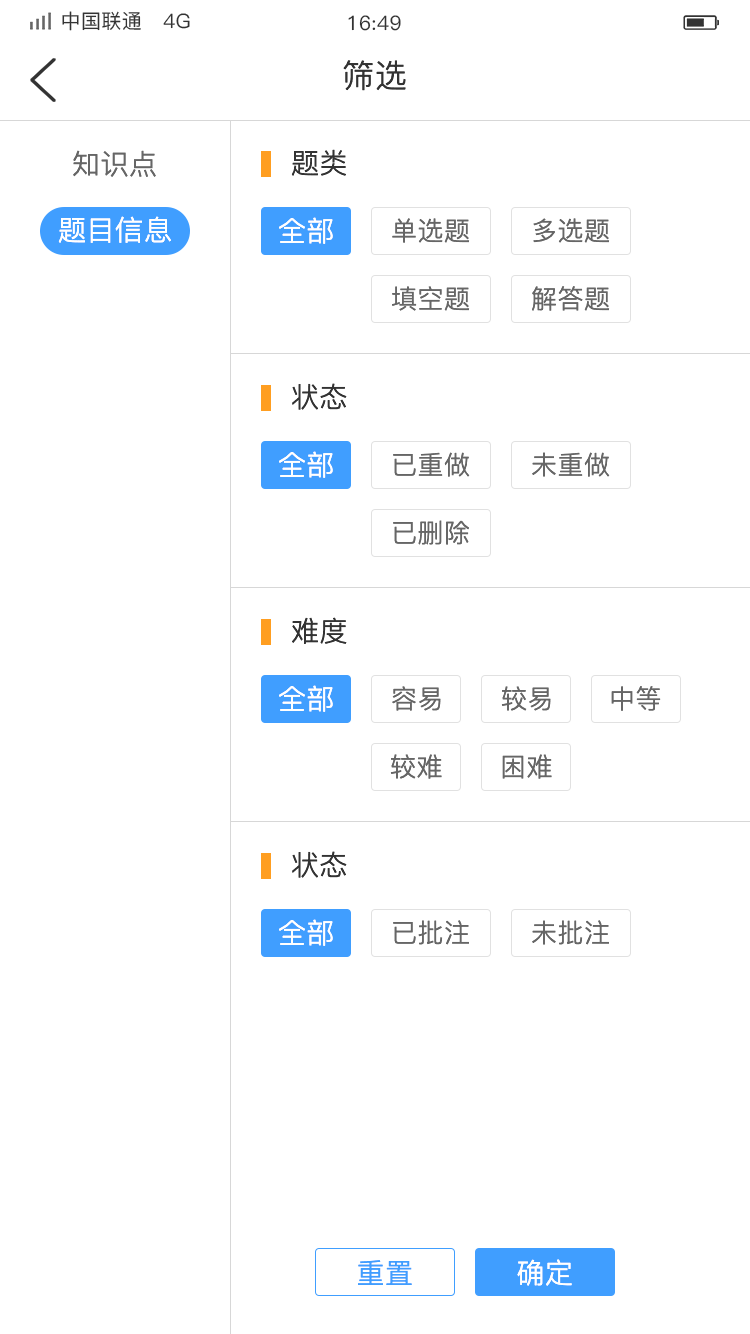
<style>
.page{position:relative;width:750px;height:1334px;background:#ffffff}
.page>*{position:absolute;margin:0}
.t1{font:20px "PingFang-SC-Medium";letter-spacing:0.02em;color:#333333}
.t2{font:32px "PingFang-SC-Regular";letter-spacing:0.02em;color:#333333}
.t3{font:28px "PingFang-SC-Regular";letter-spacing:0.02em;color:#666666}
.t4{font:28px "PingFang-SC-Regular";letter-spacing:0.02em;color:#333333}
.t5{font:28px "PingFang-SC-Regular";letter-spacing:0.02em;color:#ffffff}
.t6{font:26px "PingFang-SC-Regular";letter-spacing:0.02em;color:#666666}
.t7{font:28px "PingFang-SC-Regular";letter-spacing:0.02em;color:#409eff}
</style>
<div class="page">
<p class="t1" style="left:62px;top:11px;width:128px;height:20px">中国联通   4G</p>
<p class="t1" style="left:348px;top:15px;width:53px;height:16px">16:49</p>
<p class="t2" style="left:343px;top:60px;width:63px;height:31px">筛选</p>
<p class="t3" style="left:73px;top:150px;width:83px;height:27px">知识点</p>
<p class="t4" style="left:291px;top:149px;width:55px;height:27px">题类</p>
<p class="t5" style="left:58px;top:216px;width:113px;height:27px">题目信息</p>
<p class="t5" style="left:279px;top:217px;width:54px;height:27px">全部</p>
<p class="t6" style="left:392px;top:218px;width:78px;height:25px">单选题</p>
<p class="t6" style="left:533px;top:218px;width:77px;height:25px">多选题</p>
<p class="t6" style="left:392px;top:286px;width:78px;height:25px">填空题</p>
<p class="t6" style="left:532px;top:286px;width:78px;height:25px">解答题</p>
<p class="t4" style="left:292px;top:383px;width:55px;height:27px">状态</p>
<p class="t5" style="left:279px;top:451px;width:54px;height:27px">全部</p>
<p class="t6" style="left:393px;top:452px;width:77px;height:25px">已重做</p>
<p class="t6" style="left:532px;top:452px;width:78px;height:25px">未重做</p>
<p class="t6" style="left:393px;top:520px;width:76px;height:25px">已删除</p>
<p class="t4" style="left:292px;top:617px;width:55px;height:27px">难度</p>
<p class="t5" style="left:279px;top:685px;width:54px;height:27px">全部</p>
<p class="t6" style="left:392px;top:686px;width:49px;height:25px">容易</p>
<p class="t6" style="left:501px;top:686px;width:50px;height:25px">较易</p>
<p class="t6" style="left:611px;top:686px;width:50px;height:25px">中等</p>
<p class="t6" style="left:390px;top:754px;width:52px;height:25px">较难</p>
<p class="t6" style="left:502px;top:754px;width:50px;height:25px">困难</p>
<p class="t4" style="left:292px;top:851px;width:55px;height:27px">状态</p>
<p class="t5" style="left:279px;top:919px;width:54px;height:27px">全部</p>
<p class="t6" style="left:393px;top:920px;width:76px;height:25px">已批注</p>
<p class="t6" style="left:532px;top:920px;width:77px;height:25px">未批注</p>
<p class="t7" style="left:358px;top:1260px;width:54px;height:25px">重置</p>
<p class="t5" style="left:517px;top:1259px;width:55px;height:27px">确定</p>
</div>
